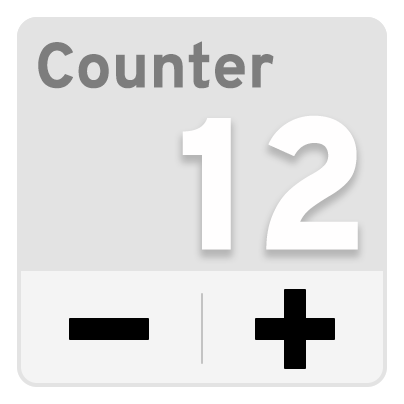
<style>
.page{position:relative;width:404px;height:404px;background:#e3e3e3}
.page>*{position:absolute;margin:0}
.t1{font:63.6px "Overpass-ExtraBold";color:#7d7d7d}
.t2{font:187.5px "Overpass-Black";color:#fffefe}
</style>
<div class="page">
<p class="t1" style="left:38px;top:41px;width:236px;height:48px">Counter</p>
<p class="t2" style="left:182px;top:115px;width:176px;height:135px">12</p>
</div>
